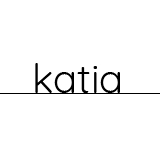
<style>
.page{position:relative;width:160px;height:160px;background:#ffffff}
.page>*{position:absolute;margin:0}
.t1{font:40px "Quicksand-Regular";color:#000000}
</style>
<div class="page">
<p class="t1" style="left:35px;top:63px;width:85px;height:30px">katia</p>
</div>
